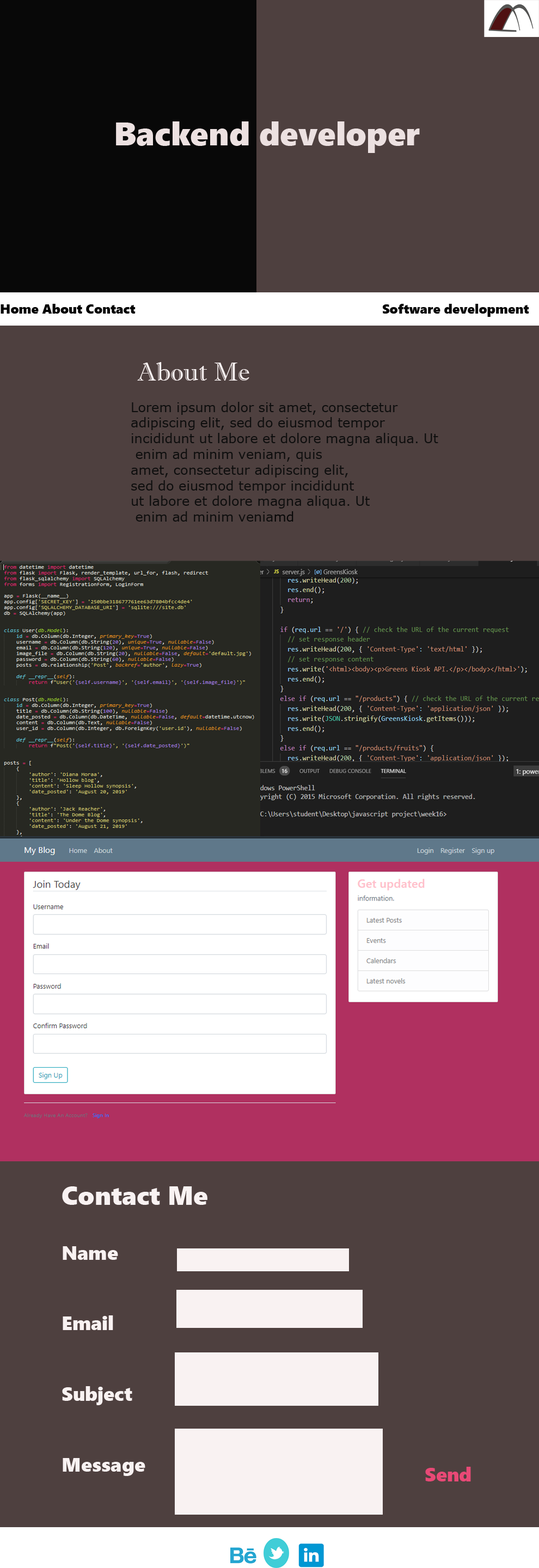
<style>
.page{position:relative;width:539px;height:1568px;background:#4e403f}
.page>*{position:absolute;margin:0}
.t1{font:32.7px "SegoeUIBlack";color:#ece1e1}
.t2{font:13.1px "SegoeUIBlack";color:#010101}
.t3{font:13.1px "SegoeUIBlack";color:#080808}
.t4{font:13.1px "MSReferenceSansSerif";color:#0e0e0e}
.t5{font:26.1px "ImprintMT-Shadow";color:#f9f2f2}
.t6{font:13.1px "MSReferenceSansSerif";color:#080808}
.t7{font:19.6px "SegoeUIBlack";color:#f9f2f2}
.t8{font:26.1px "SegoeUIBlack";color:#f9f2f2}
.t9{font:19.6px "SegoeUIBlack";color:#e84976}
</style>
<div class="page">
<p class="t1" style="left:116px;top:121px;width:304px;height:32px">Backend developer</p>
<p class="t2" style="left:1px;top:304px;width:135px;height:10px">Home About Contact</p>
<p class="t3" style="left:383px;top:304px;width:146px;height:13px">Software development</p>
<p class="t4" style="left:131px;top:362px;width:307px;height:160px"><span class="t5"> About Me<br></span><br>Lorem ipsum dolor sit amet, consectetur <br>adipiscing elit, sed do eiusmod tempor <br>incididunt ut labore et dolore magna aliqua. Ut<br> enim ad minim veniam, quis<br>amet, consectetur adipiscing elit, <br>sed do eiusmod tempor incididunt <br>ut labore et dolore magna aliqua. Ut<br> enim ad minim venia<span class="t6">md</span></p>
<p class="t7" style="left:62px;top:1186px;width:145px;height:290px"><span class="t8">Contact Me<br><br></span>Name <br><br><br>Email<br><br><br>Subject<br><br><br>Message</p>
<p class="t9" style="left:425px;top:1467px;width:46px;height:14px">Send</p>
</div>
